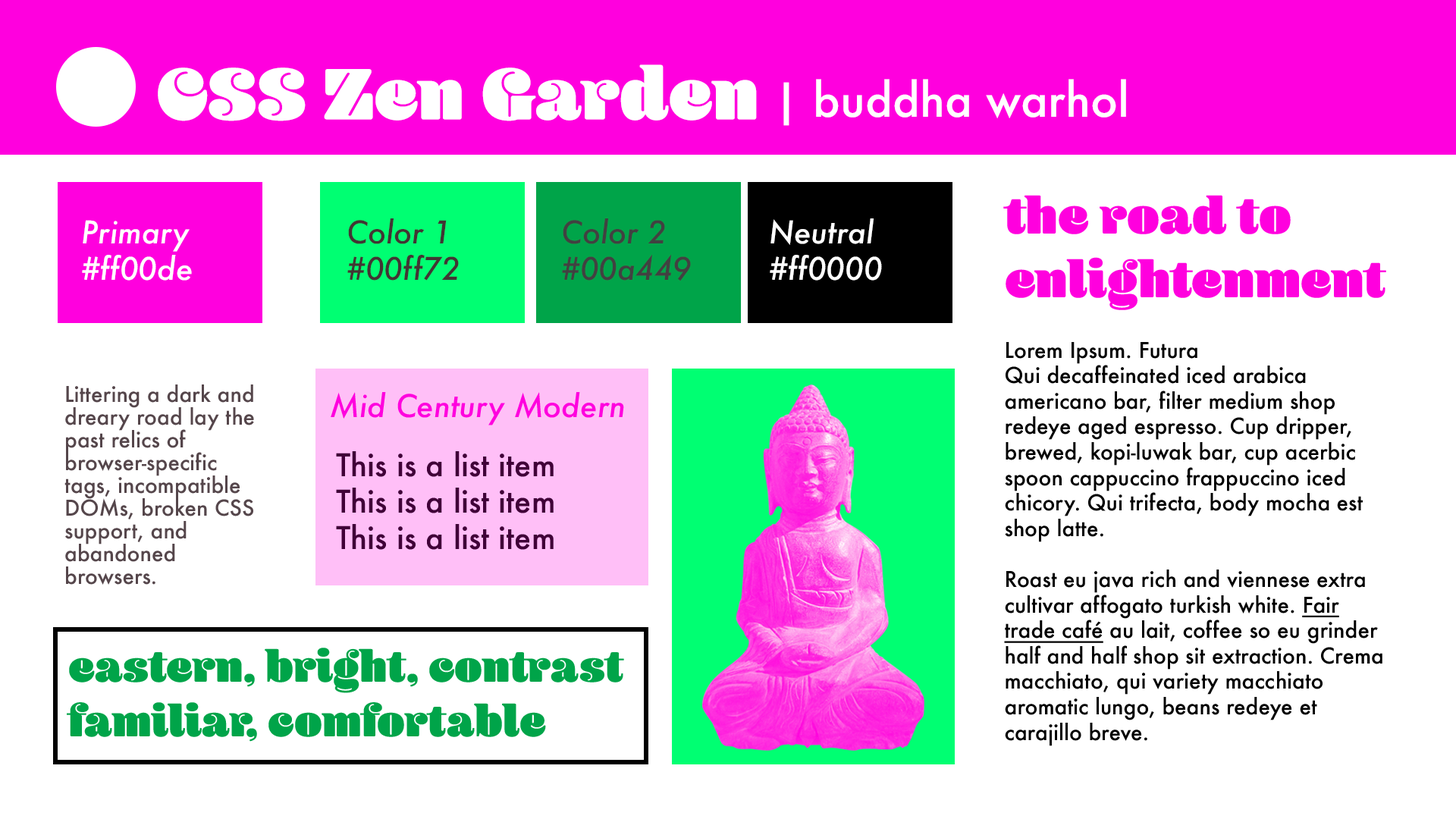
<style>
.page{position:relative;width:1456px;height:819px;background:#ffffff}
.page>*{position:absolute;margin:0}
.t1{font:75.8px "Blenny-Black";color:#ffffff}
.t2{font:45.5px "Futura-Medium";color:#ffffff}
.t3{font:21.2px "Futura-Medium";color:#000000}
.t4{font:53.1px "Blenny-Black";color:#ff00de}
.t5{font:21.2px "Futura-Medium";color:#000000;text-decoration:underline}
.t6{font:21.2px "OpenSans-Light";color:#ff5400}
.t7{font:30.3px "Futura-MediumItalic";color:#ffffff}
.t8{font:30.3px "Futura-MediumItalic";color:#413634}
.t9{font:30.3px "Futura-MediumItalic";color:#414141}
.t10{font:21.2px/22.7px "Futura-Medium";color:#55464b}
.t11{font:30.3px "Futura-MediumItalic";color:#ff00de}
.t12{font:30.3px "Futura-Medium";color:#400038}
.t13{font:45.5px "Blenny-Black";color:#00a449}
</style>
<div class="page">
<p class="t1" style="left:158px;top:64px;width:599px;height:57px">CSS Zen Garden</p>
<p class="t2" style="left:783px;top:79px;width:343px;height:47px">| buddha warhol</p>
<p class="t3" style="left:1003px;top:195px;width:383px;height:551px"><span class="t4">the road to enlightenment<br><br></span>Lorem Ipsum. Futura<br>Qui decaffeinated iced arabica americano bar, filter medium shop redeye aged espresso. Cup dripper, brewed, kopi-luwak bar, cup acerbic spoon cappuccino frappuccino iced chicory. Qui trifecta, body mocha est shop latte.<br><br>Roast eu java rich and viennese extra cultivar affogato turkish white. <span class="t5">Fair trade café</span> au lait, coffee so eu grinder half and half shop sit extraction. Crema macchiato, qui variety macchiato aromatic lungo, beans redeye et carajillo breve.<br><span class="t6"></span></p>
<p class="t7" style="left:82px;top:220px;width:110px;height:61px">Primary<br>#ff00de</p>
<p class="t8" style="left:347px;top:218px;width:112px;height:63px">Color 1<br>#00ff72</p>
<p class="t9" style="left:562px;top:218px;width:129px;height:63px">Color 2<br>#00a449</p>
<p class="t7" style="left:770px;top:218px;width:112px;height:63px">Neutral<br>#ff0000</p>
<p class="t10" style="left:64px;top:384px;width:190px;height:201px">Littering a dark and dreary road lay the past relics of browser-specific tags, incompatible DOMs, broken CSS support, and abandoned browsers.</p>
<p class="t11" style="left:331px;top:392px;width:293px;height:33px">Mid Century Modern</p>
<p class="t12" style="left:336px;top:451px;width:218px;height:99px">This is a list item<br>This is a list item<br>This is a list item</p>
<p class="t13" style="left:67px;top:648px;width:557px;height:94px">eastern, bright, contrast<br>familiar, comfortable</p>
</div>
